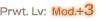
<style>
.page{position:relative;width:99px;height:20px;background:#ffffff}
.page>*{position:absolute;margin:0}
.t1{font:10px "GothicMB101Pro-DeBold";letter-spacing:-0.04em;color:#cc6719}
.t2{font:14px "GothicMB101Pro-DeBold";letter-spacing:-0.04em;color:#cc6719}
.t3{font:10px "GothicMB101Pro-DeBold";letter-spacing:-0.04em;color:#8b6e51}
</style>
<div class="page">
<p class="t1" style="left:52px;top:4px;width:42px;height:12px">Mod.+<span class="t2">3</span></p>
<p class="t3" style="left:0px;top:7px;width:46px;height:9px;opacity:0.9">Prwt. Lv:</p>
</div>
